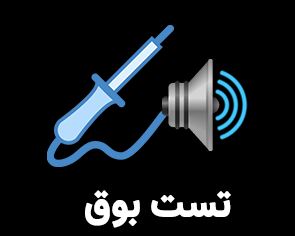
<style>
.page{position:relative;width:295px;height:236px;background:#000000}
.page>*{position:absolute;margin:0}
.t1{font:39.8px "Vazirmatn-Bold";letter-spacing:-0.01em;color:#ffffff;font-weight:bold;scale:0.94 1}
</style>
<div class="page">
<p class="t1" style="left:85px;top:190px;width:146px;height:38px">تست بوق</p>
</div>
